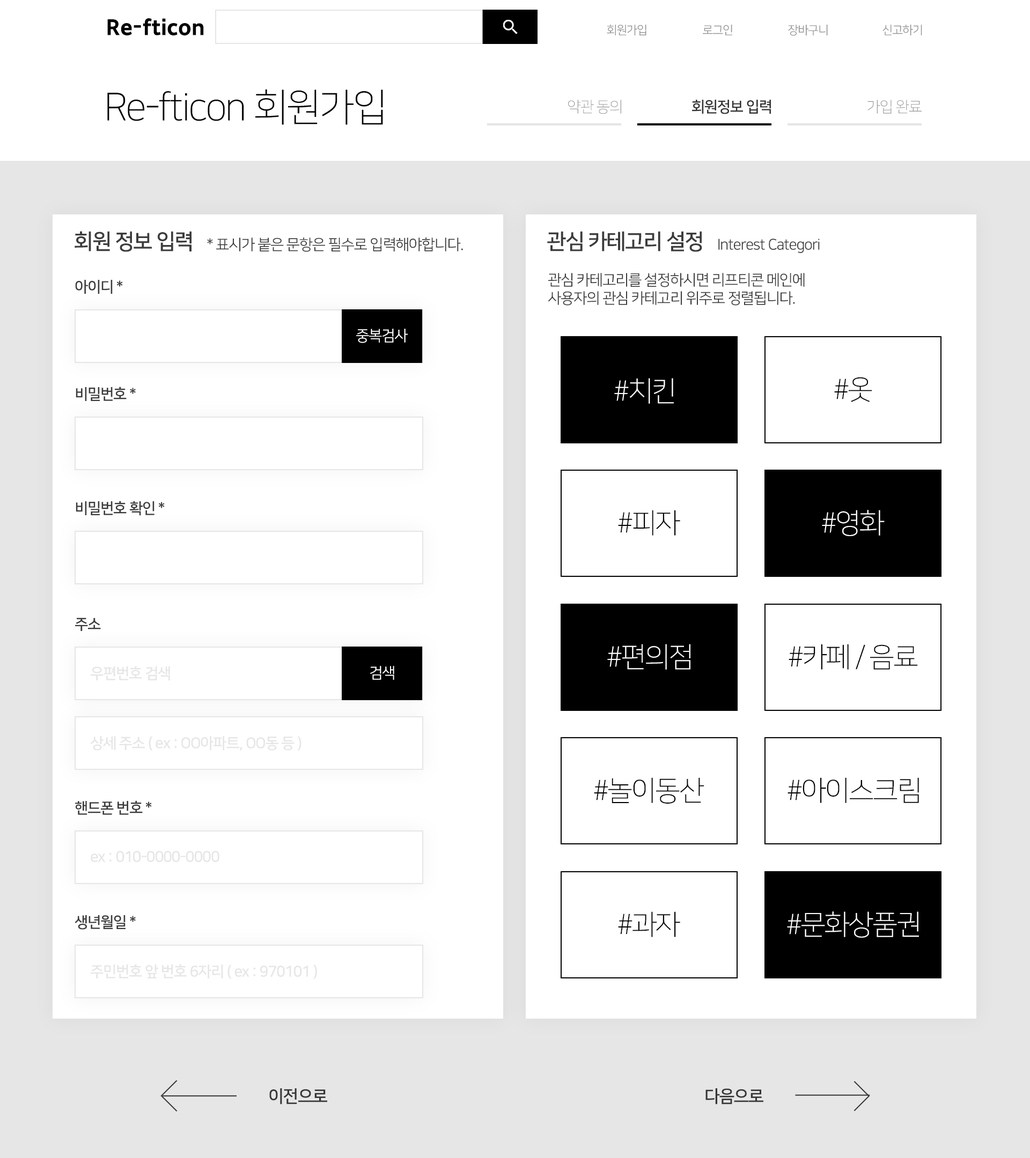
<style>
.page{position:relative;width:1030px;height:1158px;background:#ffffff}
.page>*{position:absolute;margin:0}
.t1{font:21.4px "SDGothicNeoc-gExBd";color:#000000}
.t2{font:11.8px "NanumSquareOTFR";letter-spacing:-0.05em;color:#959595}
.t3{font:38.6px "NanumSquareOTFL";letter-spacing:-0.05em;color:#000000}
.t4{font:15px "NanumSquareOTFL";letter-spacing:-0.05em;color:#959595}
.t5{font:15px "NanumSquareOTFB";letter-spacing:-0.05em;color:#353535}
.t6{font:21.4px "NanumSquareOTFB";letter-spacing:-0.05em;color:#3c3c3c}
.t7{font:15px "NanumSquareOTFR";letter-spacing:-0.05em;color:#3b3b3b}
.t8{font:15px "NanumSquareOTFB";letter-spacing:-0.05em;color:#3b3b3b}
.t9{font:15px "NanumSquareOTFR";letter-spacing:-0.05em;color:#ffffff}
.t10{font:27.9px "NanumSquareOTFL";letter-spacing:-0.05em;color:#000000}
.t11{font:27.9px "NanumSquareOTFL";letter-spacing:-0.05em;color:#ffffff}
.t12{font:15px "NanumSquareOTFB";letter-spacing:-0.05em;color:#e6e6e6}
.t13{font:17.2px "NanumSquareOTFB";letter-spacing:-0.05em;color:#353535}
</style>
<div class="page">
<p class="t1" style="left:107px;top:18px;width:97px;height:18px">Re-fticon</p>
<p class="t2" style="left:606px;top:24px;width:40px;height:11px">회원가입</p>
<p class="t2" style="left:702px;top:25px;width:30px;height:10px">로그인</p>
<p class="t2" style="left:788px;top:25px;width:39px;height:11px">장바구니</p>
<p class="t2" style="left:882px;top:25px;width:40px;height:10px">신고하기</p>
<p class="t3" style="left:107px;top:89px;width:276px;height:36px">Re-fticon 회원가입</p>
<p class="t4" style="left:568px;top:100px;width:53px;height:14px">약관 동의</p>
<p class="t5" style="left:692px;top:100px;width:79px;height:14px">회원정보 입력</p>
<p class="t4" style="left:867px;top:100px;width:54px;height:14px">가입 완료</p>
<p class="t6" style="left:75px;top:231px;width:116px;height:21px">회원 정보 입력</p>
<p class="t6" style="left:547px;top:231px;width:155px;height:21px">관심 카테고리 설정</p>
<p class="t7" style="left:207px;top:237px;width:256px;height:15px">* 표시가 붙은 문항은 필수로 입력해야합니다.</p>
<p class="t7" style="left:718px;top:239px;width:101px;height:14px">Interest Categori</p>
<p class="t8" style="left:75px;top:280px;width:48px;height:14px">아이디 *</p>
<p class="t7" style="left:547px;top:273px;width:257px;height:33px">관심 카테고리를 설정하시면 리프티콘 메인에<br>사용자의 관심 카테고리 위주로 정렬됩니다.</p>
<p class="t9" style="left:356px;top:329px;width:52px;height:14px">중복검사</p>
<p class="t10" style="left:834px;top:377px;width:38px;height:25px">#옷</p>
<p class="t8" style="left:76px;top:387px;width:60px;height:14px">비밀번호 *</p>
<p class="t11" style="left:614px;top:378px;width:59px;height:26px">#치킨</p>
<p class="t8" style="left:76px;top:501px;width:89px;height:15px">비밀번호 확인 *</p>
<p class="t10" style="left:618px;top:510px;width:62px;height:26px">#피자</p>
<p class="t11" style="left:821px;top:510px;width:63px;height:26px">#영화</p>
<p class="t8" style="left:75px;top:618px;width:26px;height:13px">주소</p>
<p class="t11" style="left:607px;top:644px;width:83px;height:26px">#편의점</p>
<p class="t10" style="left:788px;top:644px;width:129px;height:26px">#카페 / 음료</p>
<p class="t12" style="left:91px;top:666px;width:79px;height:15px">우편번호 검색</p>
<p class="t9" style="left:370px;top:666px;width:24px;height:14px">검색</p>
<p class="t12" style="left:90px;top:736px;width:211px;height:15px">상세 주소 ( ex : OO아파트, OO동 등 )</p>
<p class="t10" style="left:594px;top:778px;width:110px;height:26px">#놀이동산</p>
<p class="t10" style="left:787px;top:778px;width:132px;height:25px">#아이스크림</p>
<p class="t8" style="left:75px;top:801px;width:77px;height:14px">핸드폰 번호 *</p>
<p class="t12" style="left:91px;top:851px;width:128px;height:11px">ex : 010-0000-0000</p>
<p class="t8" style="left:75px;top:915px;width:61px;height:15px">생년월일 *</p>
<p class="t10" style="left:618px;top:912px;width:62px;height:25px">#과자</p>
<p class="t11" style="left:787px;top:912px;width:132px;height:26px">#문화상품권</p>
<p class="t12" style="left:91px;top:964px;width:226px;height:15px">주민번호 앞 번호 6자리 ( ex : 970101 )</p>
<p class="t13" style="left:269px;top:1089px;width:58px;height:16px">이전으로</p>
<p class="t13" style="left:705px;top:1089px;width:58px;height:16px">다음으로</p>
</div>
